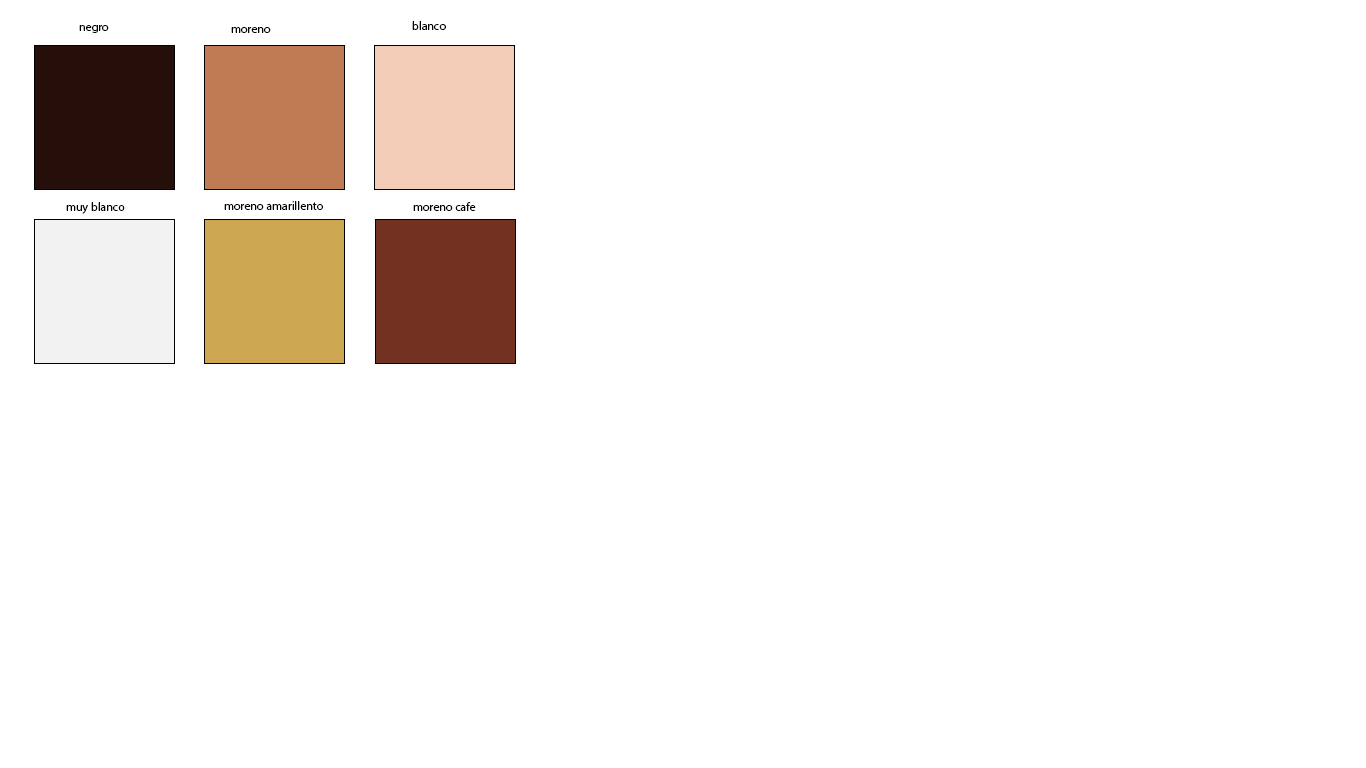
<style>
.page{position:relative;width:1366px;height:768px;background:#ffffff}
.page>*{position:absolute;margin:0}
.t1{font:12px "MyriadPro-Regular";color:#000000}
</style>
<div class="page">
<p class="t1" style="left:79px;top:25px;width:30px;height:8px">negro</p>
<p class="t1" style="left:231px;top:27px;width:40px;height:6px">moreno</p>
<p class="t1" style="left:412px;top:21px;width:34px;height:9px">blanco</p>
<p class="t1" style="left:66px;top:202px;width:59px;height:12px">muy blanco</p>
<p class="t1" style="left:224px;top:201px;width:99px;height:9px">moreno amarillento</p>
<p class="t1" style="left:413px;top:202px;width:63px;height:9px">moreno cafe</p>
</div>
